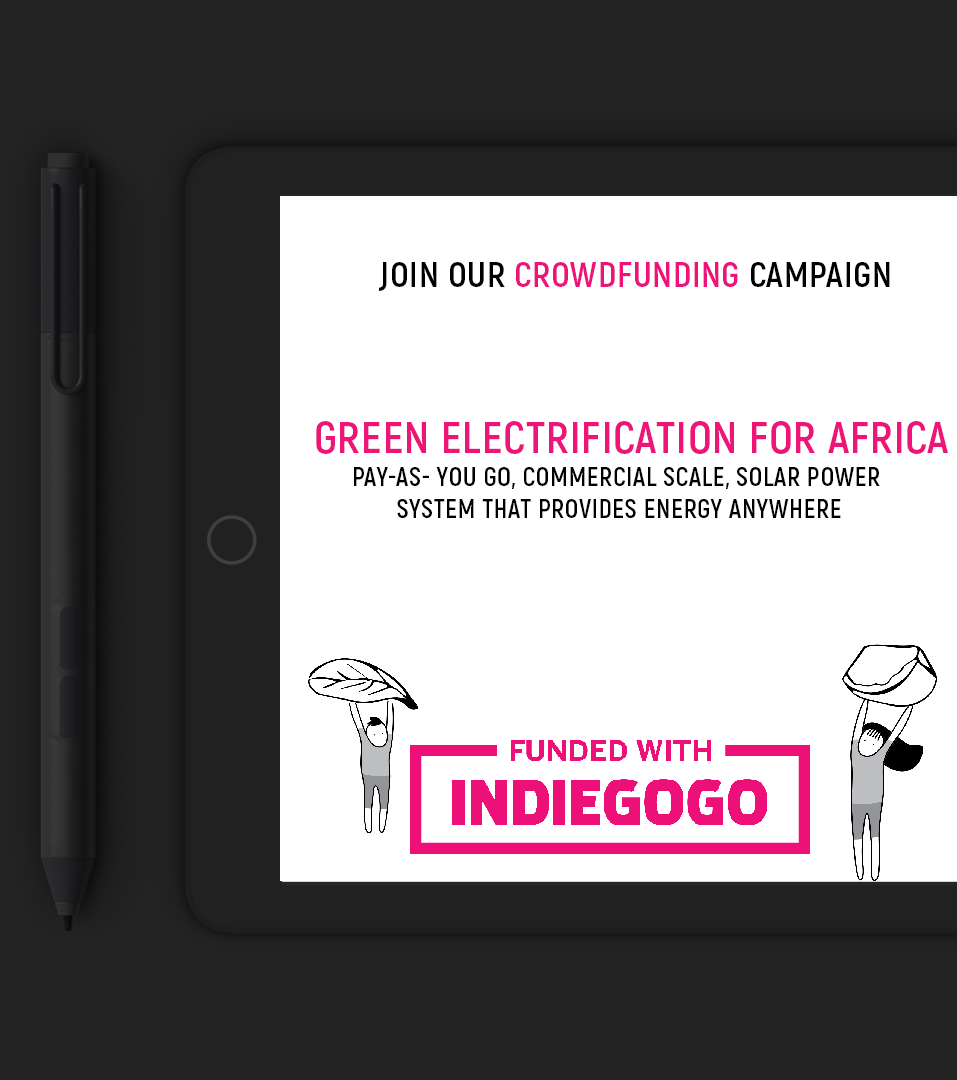
<style>
.page{position:relative;width:957px;height:1080px;background:#ffffff}
.page>*{position:absolute;margin:0}
.t1{font:35.7px "Akrobat-Bold";letter-spacing:0.02em;color:#ed1378;text-transform:uppercase}
.t2{font:35.7px "Akrobat-Bold";letter-spacing:0.02em;color:#000000;text-transform:uppercase}
.t3{font:45px "Akrobat-Bold";letter-spacing:0.02em;color:#ed1678;text-transform:uppercase}
.t4{font:26px "Akrobat-Bold";letter-spacing:0.02em;color:#000000;text-transform:uppercase}
</style>
<div class="page">
<p class="t1" style="left:379px;top:262px;width:511px;height:29px"><span class="t2">JOIN OUR </span>CROWDFUNDING<span class="t2"> CAMPAIGN</span></p>
<p class="t3" style="left:316px;top:421px;width:632px;height:33px">Green Electrification for Africa</p>
<p class="t4" style="left:354px;top:467px;width:526px;height:51px;text-align:center">pay-as- you go, commercial scale, solar power <br>system that provides energy anywhere</p>
</div>
